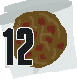
<style>
.page{position:relative;width:77px;height:79px;background:#e2e8e7}
.page>*{position:absolute;margin:0}
.t1{font:50px "BigNoodleTitling";color:#1a1d1f;font-weight:bold;scale:0.97 1}
</style>
<div class="page">
<p class="t1" style="left:3px;top:28px;width:30px;height:37px">12</p>
</div>
